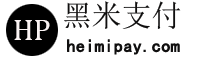
<style>
.page{position:relative;width:202px;height:60px;background:#ffffff}
.page>*{position:absolute;margin:0}
.t1{font:30px "SimSun";color:#100f0f}
.t2{font:30px "Cambria";color:#faf3f3}
.t3{font:18px "SimHei";color:#100f0f;font-weight:bold}
</style>
<div class="page">
<p class="t1" style="left:64px;top:1px;width:117px;height:28px">黑米支付</p>
<p class="t2" style="left:14px;top:20px;width:36px;height:20px">HP</p>
<p class="t3" style="left:67px;top:39px;width:113px;height:16px">heimipay.com</p>
</div>
